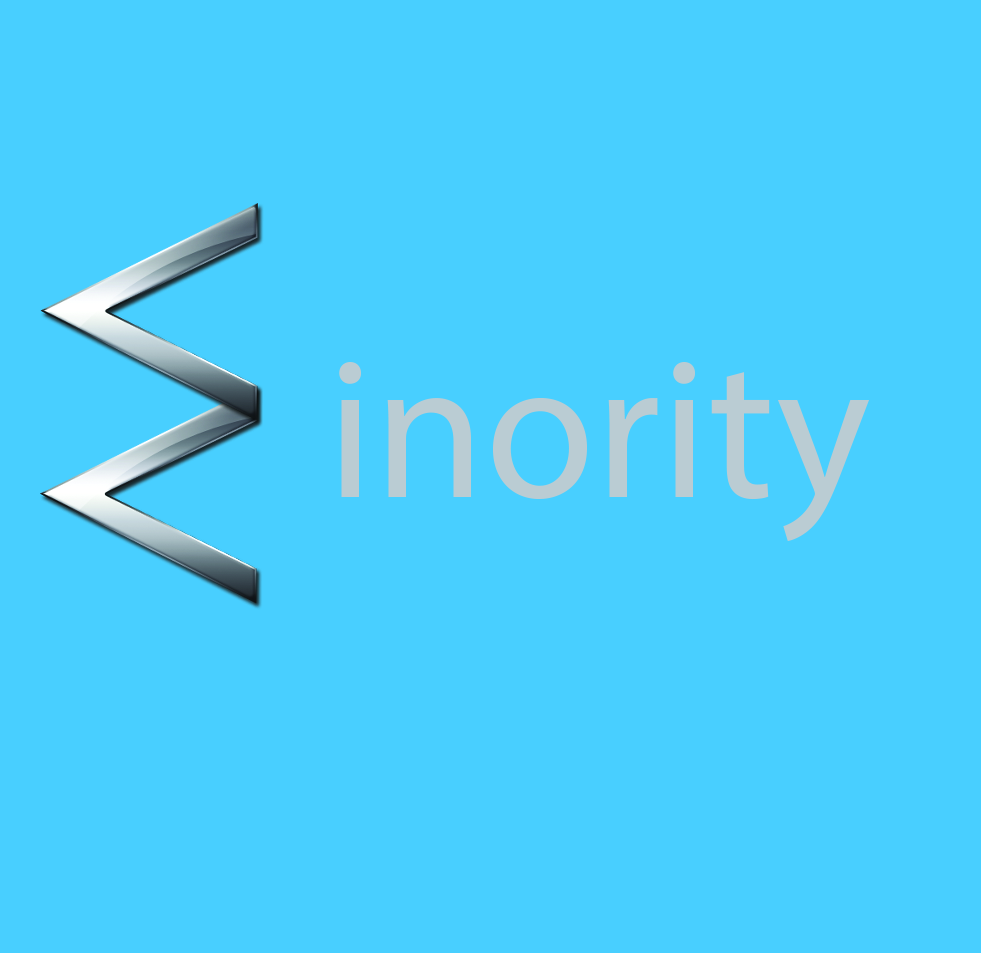
<style>
.page{position:relative;width:981px;height:953px;background:#48cfff}
.page>*{position:absolute;margin:0}
.t1{font:200px "MyriadPro-Regular";color:#baccd3}
</style>
<div class="page">
<p class="t1" style="left:339px;top:362px;width:530px;height:180px">inority</p>
</div>
